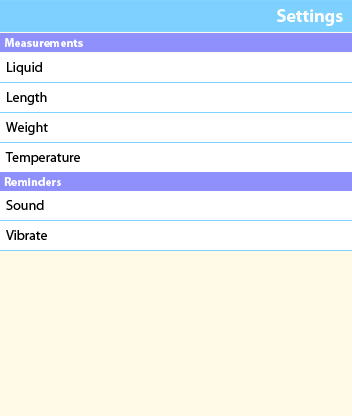
<style>
.page{position:relative;width:352px;height:416px;background:#ffffff}
.page>*{position:absolute;margin:0}
.t1{font:18px "MyriadPro-Bold";color:#ffffff}
.t2{font:12px "MyriadPro-Bold";color:#ffffff}
.t3{font:14px "MyriadPro-Regular";color:#000000}
</style>
<div class="page">
<p class="t1" style="left:277px;top:9px;width:66px;height:17px">Settings</p>
<p class="t2" style="left:4px;top:38px;width:79px;height:9px">Measurements</p>
<p class="t3" style="left:7px;top:62px;width:35px;height:13px">Liquid</p>
<p class="t3" style="left:7px;top:92px;width:40px;height:13px">Length</p>
<p class="t3" style="left:6px;top:122px;width:42px;height:13px">Weight</p>
<p class="t3" style="left:5px;top:152px;width:75px;height:13px">Temperature</p>
<p class="t2" style="left:4px;top:177px;width:57px;height:9px">Reminders</p>
<p class="t3" style="left:6px;top:200px;width:38px;height:10px">Sound</p>
<p class="t3" style="left:6px;top:230px;width:41px;height:10px">Vibrate</p>
</div>
